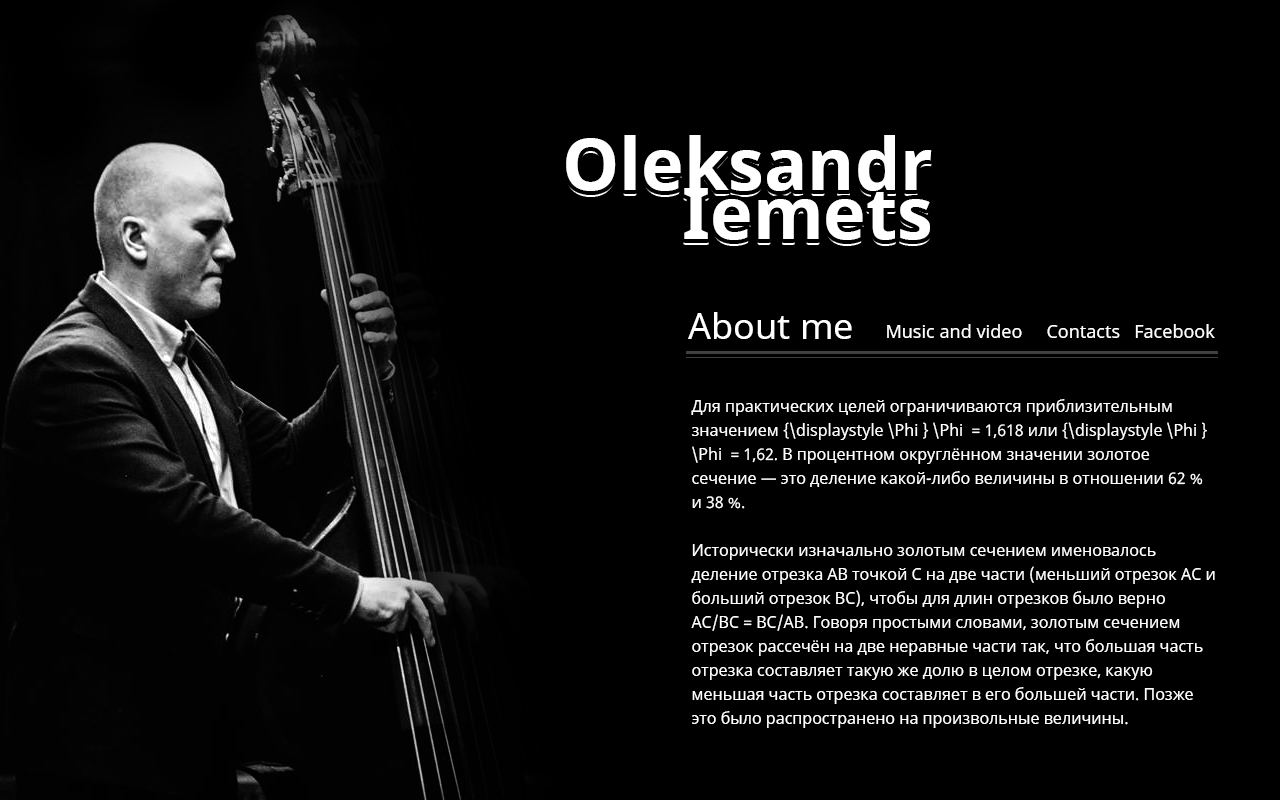
<style>
.page{position:relative;width:1280px;height:800px;background:#000000}
.page>*{position:absolute;margin:0}
.t1{font:72px/49px "NotoSans-Bold";color:#ffffff}
.t2{font:36px "NotoSans";color:#ffffff}
.t3{font:18px "NotoSans";color:#ffffff}
.t4{font:16px/24px "NotoSans";color:#ffffff}
</style>
<div class="page">
<p class="t1" style="left:566px;top:135px;width:366px;height:105px;text-align:right">Oleksandr<br>Iemets</p>
<p class="t2" style="left:688px;top:312px;width:164px;height:27px">About me</p>
<p class="t3" style="left:887px;top:324px;width:135px;height:14px">Music and video</p>
<p class="t3" style="left:1047px;top:324px;width:168px;height:14px">Contacts   Facebook</p>
<p class="t4" style="left:691px;top:399px;width:524px;height:329px">Для практических целей ограничиваются приблизительным значением {\displaystyle \Phi } \Phi  = 1,618 или {\displaystyle \Phi } \Phi  = 1,62. В процентном округлённом значении золотое сечение — это деление какой-либо величины в отношении 62 % и 38 %.<br><br>Исторически изначально золотым сечением именовалось деление отрезка АВ точкой С на две части (меньший отрезок АС и больший отрезок ВС), чтобы для длин отрезков было верно AC/BC = BC/AВ. Говоря простыми словами, золотым сечением отрезок рассечён на две неравные части так, что большая часть отрезка составляет такую же долю в целом отрезке, какую меньшая часть отрезка составляет в его большей части. Позже это было распространено на произвольные величины.</p>
</div>
